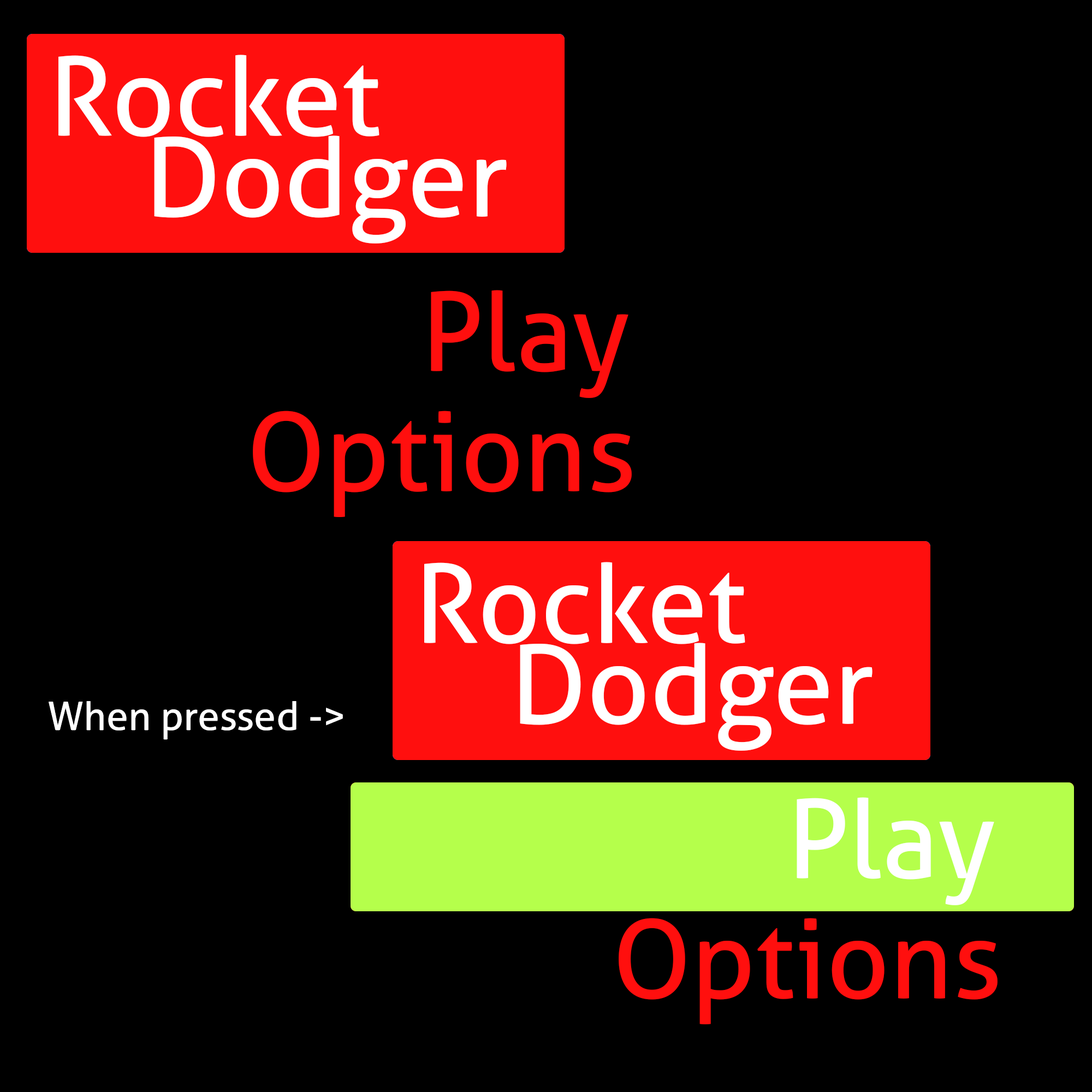
<style>
.page{position:relative;width:1092px;height:1092px;background:#000000}
.page>*{position:absolute;margin:0}
.t1{font:109.2px "Aller";color:#ffffff}
.t2{font:109.2px "Aller";color:#ff0f0e}
.t3{font:39.3px "Aller";color:#ffffff}
</style>
<div class="page">
<p class="t1" style="left:58px;top:55px;width:321px;height:82px">Rocket</p>
<p class="t1" style="left:154px;top:135px;width:353px;height:109px">Dodger</p>
<p class="t2" style="left:431px;top:290px;width:197px;height:108px">Play</p>
<p class="t2" style="left:253px;top:411px;width:379px;height:106px">Options</p>
<p class="t1" style="left:424px;top:562px;width:321px;height:82px">Rocket</p>
<p class="t1" style="left:520px;top:643px;width:352px;height:108px">Dodger</p>
<p class="t3" style="left:49px;top:701px;width:294px;height:39px">When pressed -&gt;</p>
<p class="t1" style="left:797px;top:797px;width:197px;height:108px">Play</p>
<p class="t2" style="left:619px;top:918px;width:379px;height:106px">Options</p>
</div>
